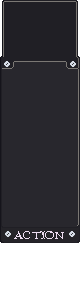
<style>
.page{position:relative;width:80px;height:300px;background:#28272d}
.page>*{position:absolute;margin:0}
.t1{font:11.1px "Immortal";color:#edddf1}
</style>
<div class="page">
<p class="t1" style="left:14px;top:231px;width:50px;height:8px">ACTION</p>
</div>
